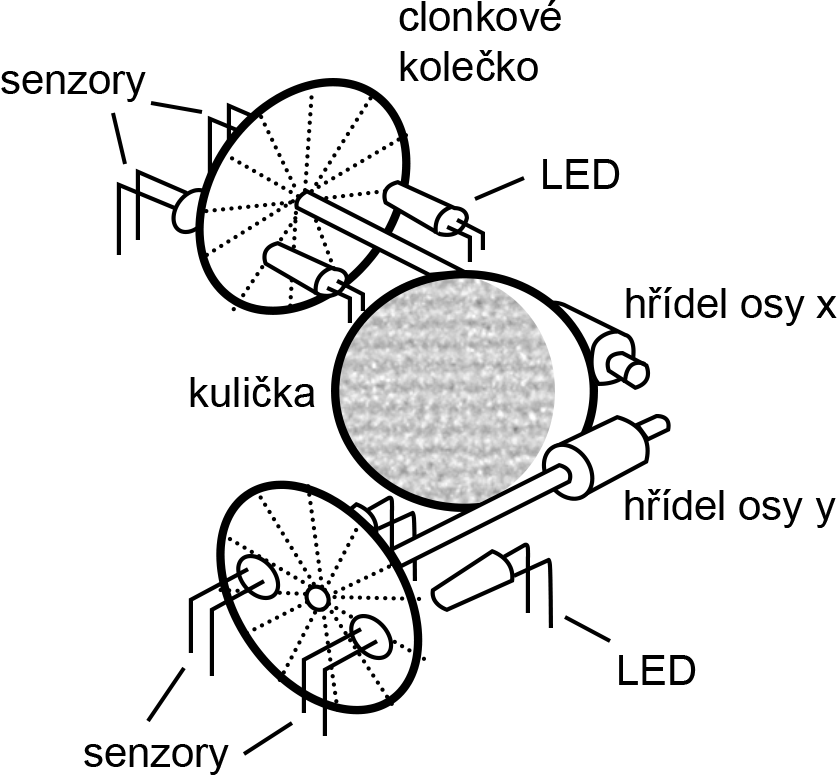
<style>
.page{position:relative;width:838px;height:775px;background:#ffffff}
.page>*{position:absolute;margin:0}
.t1{font:41.7px "ArialMT";color:#000000}
</style>
<div class="page">
<p class="t1" style="left:399px;top:0px;width:162px;height:81px">clonkové<br>kolečko</p>
<p class="t1" style="left:1px;top:71px;width:145px;height:31px">senzory</p>
<p class="t1" style="left:543px;top:159px;width:77px;height:30px">LED</p>
<p class="t1" style="left:626px;top:287px;width:211px;height:39px">hřídel osy x</p>
<p class="t1" style="left:190px;top:376px;width:125px;height:31px">kulička</p>
<p class="t1" style="left:625px;top:489px;width:211px;height:39px">hřídel osy y</p>
<p class="t1" style="left:619px;top:655px;width:77px;height:30px">LED</p>
<p class="t1" style="left:84px;top:744px;width:145px;height:31px">senzory</p>
</div>
